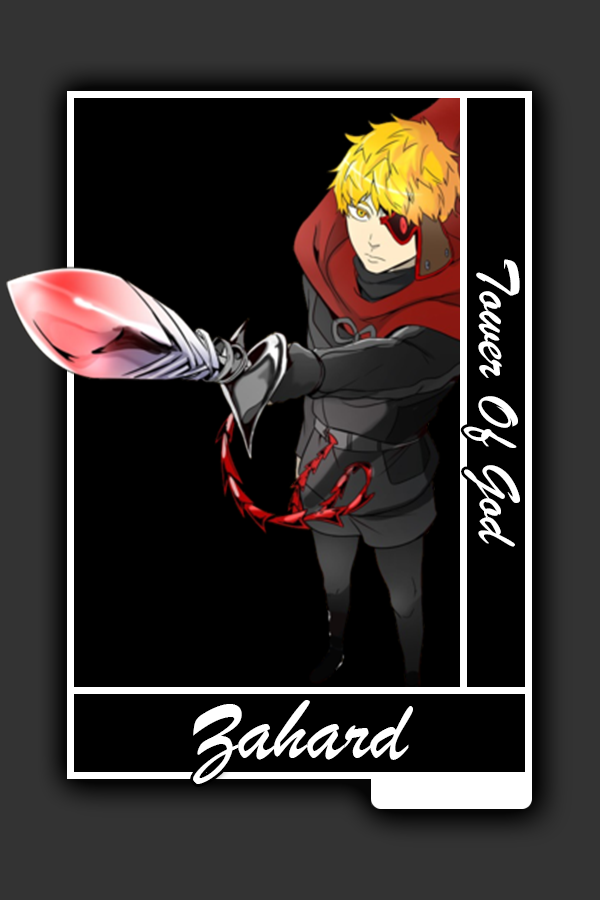
<style>
.page{position:relative;width:600px;height:900px;background:#000000}
.page>*{position:absolute;margin:0}
.t1{font:61.5px "BrushScriptMT";color:#ffffff}
.t2{font:89.7px "BrushScriptMT";color:#ffffff}
</style>
<div class="page">
<p class="t1" style="left:463px;top:259px;width:57px;height:288px;rotate:90deg">Tower Of God</p>
<p class="t2" style="left:193px;top:700px;width:220px;height:84px">Zahard</p>
</div>
